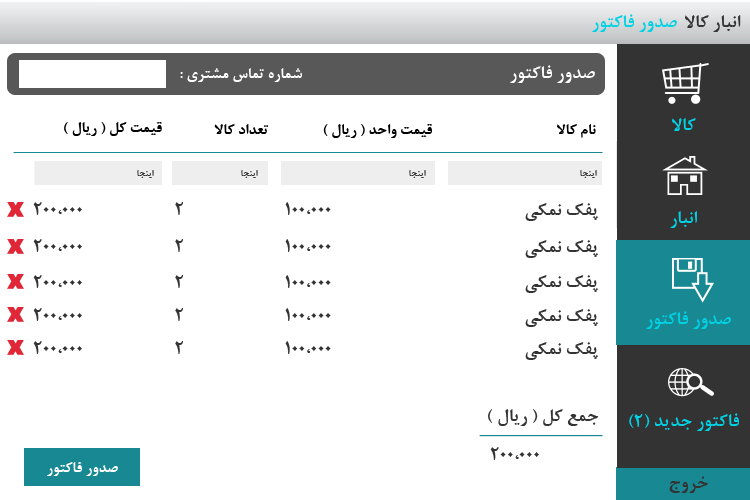
<style>
.page{position:relative;width:750px;height:500px;background:#ffffff}
.page>*{position:absolute;margin:0}
.t1{font:20px "BNazaninBold";color:#00d2e5}
.t2{font:20px "BNazaninBold";color:#333333}
.t3{font:20px "BNazaninBold";color:#ffffff}
.t4{font:16.7px "BNazaninBold";color:#ffffff}
.t5{font:16.7px "BNazaninBold";color:#000000}
.t6{font:10px "BNazaninBold";color:#333333}
</style>
<div class="page">
<p class="t1" style="left:592px;top:14px;width:85px;height:18px">صدور فاکتور</p>
<p class="t2" style="left:685px;top:15px;width:56px;height:17px">انبار کالا</p>
<p class="t3" style="left:510px;top:65px;width:85px;height:18px">صدور فاکتور</p>
<p class="t4" style="left:180px;top:68px;width:122px;height:14px">شماره تماس مشتری :</p>
<p class="t5" style="left:64px;top:122px;width:98px;height:14px">قیمت کل ( ریال )</p>
<p class="t5" style="left:214px;top:124px;width:55px;height:10px">تعداد کالا</p>
<p class="t5" style="left:323px;top:124px;width:109px;height:14px">قیمت واحد ( ریال )</p>
<p class="t5" style="left:557px;top:124px;width:39px;height:14px">نام کالا</p>
<p class="t1" style="left:672px;top:118px;width:24px;height:13px">کالا</p>
<p class="t6" style="left:137px;top:170px;width:17px;height:8px">اینجا</p>
<p class="t6" style="left:241px;top:170px;width:17px;height:8px">اینجا</p>
<p class="t6" style="left:409px;top:170px;width:17px;height:8px">اینجا</p>
<p class="t6" style="left:580px;top:170px;width:17px;height:8px">اینجا</p>
<p class="t2" style="left:33px;top:202px;width:49px;height:13px">200،000</p>
<p class="t2" style="left:175px;top:202px;width:8px;height:13px">2</p>
<p class="t2" style="left:285px;top:202px;width:46px;height:13px">100،000</p>
<p class="t2" style="left:525px;top:203px;width:73px;height:18px">پفک نمکی</p>
<p class="t1" style="left:670px;top:211px;width:27px;height:17px">انبار</p>
<p class="t2" style="left:33px;top:239px;width:49px;height:13px">200،000</p>
<p class="t2" style="left:175px;top:239px;width:8px;height:13px">2</p>
<p class="t2" style="left:285px;top:239px;width:46px;height:13px">100،000</p>
<p class="t2" style="left:525px;top:240px;width:73px;height:18px">پفک نمکی</p>
<p class="t2" style="left:33px;top:275px;width:49px;height:13px">200،000</p>
<p class="t2" style="left:175px;top:275px;width:8px;height:13px">2</p>
<p class="t2" style="left:285px;top:275px;width:46px;height:13px">100،000</p>
<p class="t2" style="left:525px;top:275px;width:73px;height:18px">پفک نمکی</p>
<p class="t2" style="left:33px;top:308px;width:49px;height:13px">200،000</p>
<p class="t2" style="left:175px;top:308px;width:8px;height:13px">2</p>
<p class="t2" style="left:285px;top:308px;width:46px;height:13px">100،000</p>
<p class="t2" style="left:525px;top:309px;width:73px;height:18px">پفک نمکی</p>
<p class="t1" style="left:646px;top:311px;width:85px;height:18px">صدور فاکتور</p>
<p class="t2" style="left:33px;top:341px;width:49px;height:13px">200،000</p>
<p class="t2" style="left:175px;top:341px;width:8px;height:13px">2</p>
<p class="t2" style="left:285px;top:341px;width:46px;height:13px">100،000</p>
<p class="t2" style="left:525px;top:342px;width:73px;height:18px">پفک نمکی</p>
<p class="t2" style="left:488px;top:409px;width:111px;height:17px">جمع کل ( ریال )</p>
<p class="t1" style="left:629px;top:413px;width:110px;height:18px">فاکتور جدید (2)</p>
<p class="t2" style="left:490px;top:447px;width:49px;height:13px">200،000</p>
<p class="t4" style="left:47px;top:462px;width:71px;height:14px">صدور فاکتور</p>
<p class="t2" style="left:669px;top:476px;width:39px;height:17px">خروج</p>
</div>
